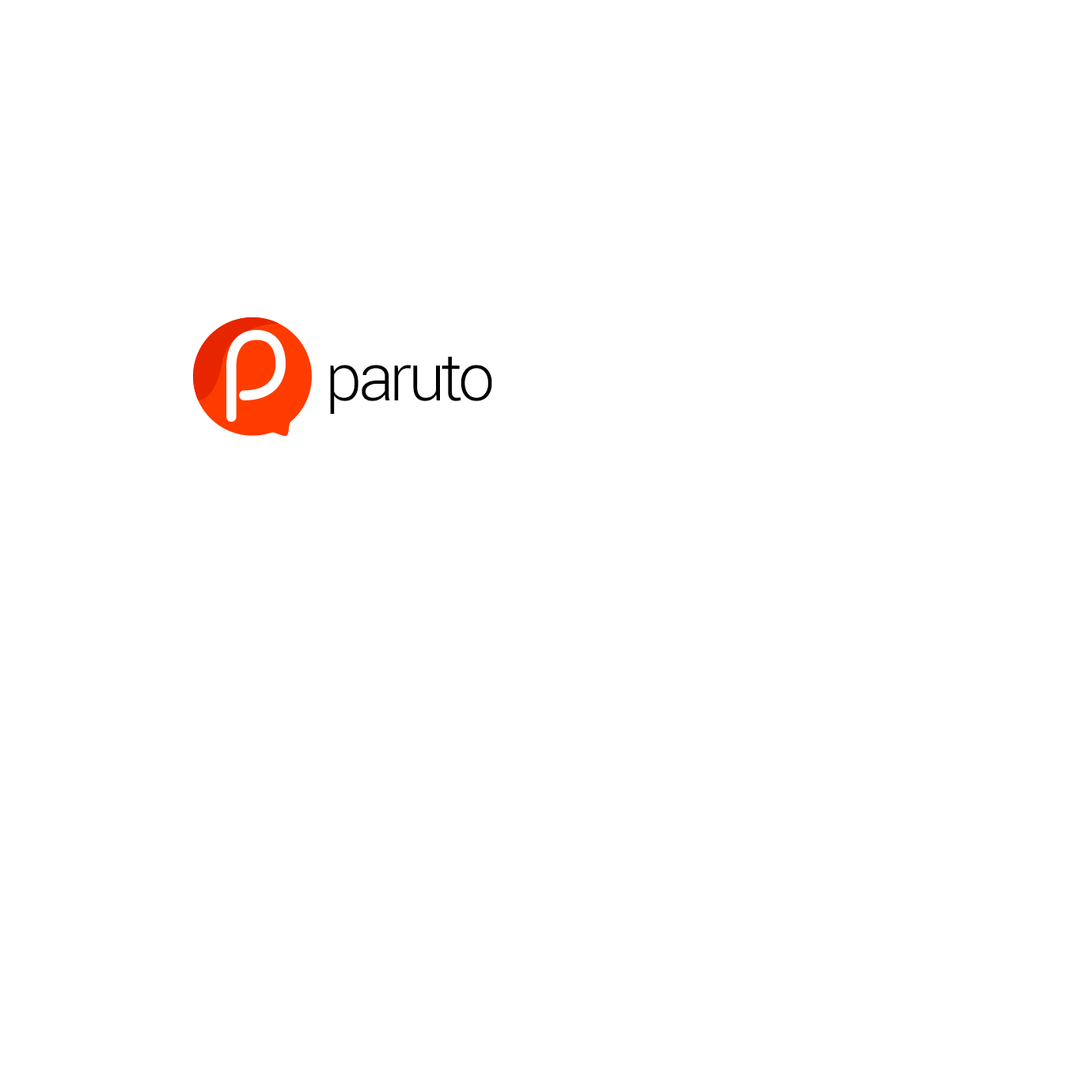
<style>
.page{position:relative;width:1092px;height:1092px;background:#ffffff}
.page>*{position:absolute;margin:0}
.t1{font:65.9px "Roboto-Light";letter-spacing:-0.06em;color:#000000}
</style>
<div class="page">
<p class="t1" style="left:330px;top:356px;width:162px;height:58px">paruto</p>
</div>
